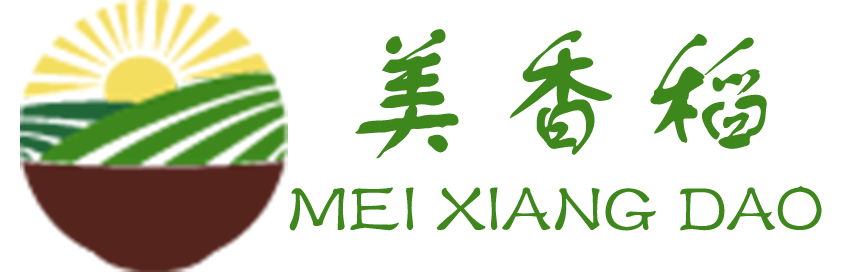
<style>
.page{position:relative;width:843px;height:272px;background:#ffffff}
.page>*{position:absolute;margin:0}
.t1{font:150px "FZSTK--GBK1-0";color:#3d871c}
.t2{font:75px "FZSTK--GBK1-0";color:#3d871c}
</style>
<div class="page">
<p class="t1" style="left:355px;top:29px;width:412px;height:130px">美香稻</p>
<p class="t2" style="left:289px;top:186px;width:533px;height:45px">MEI XIANG DAO</p>
</div>
